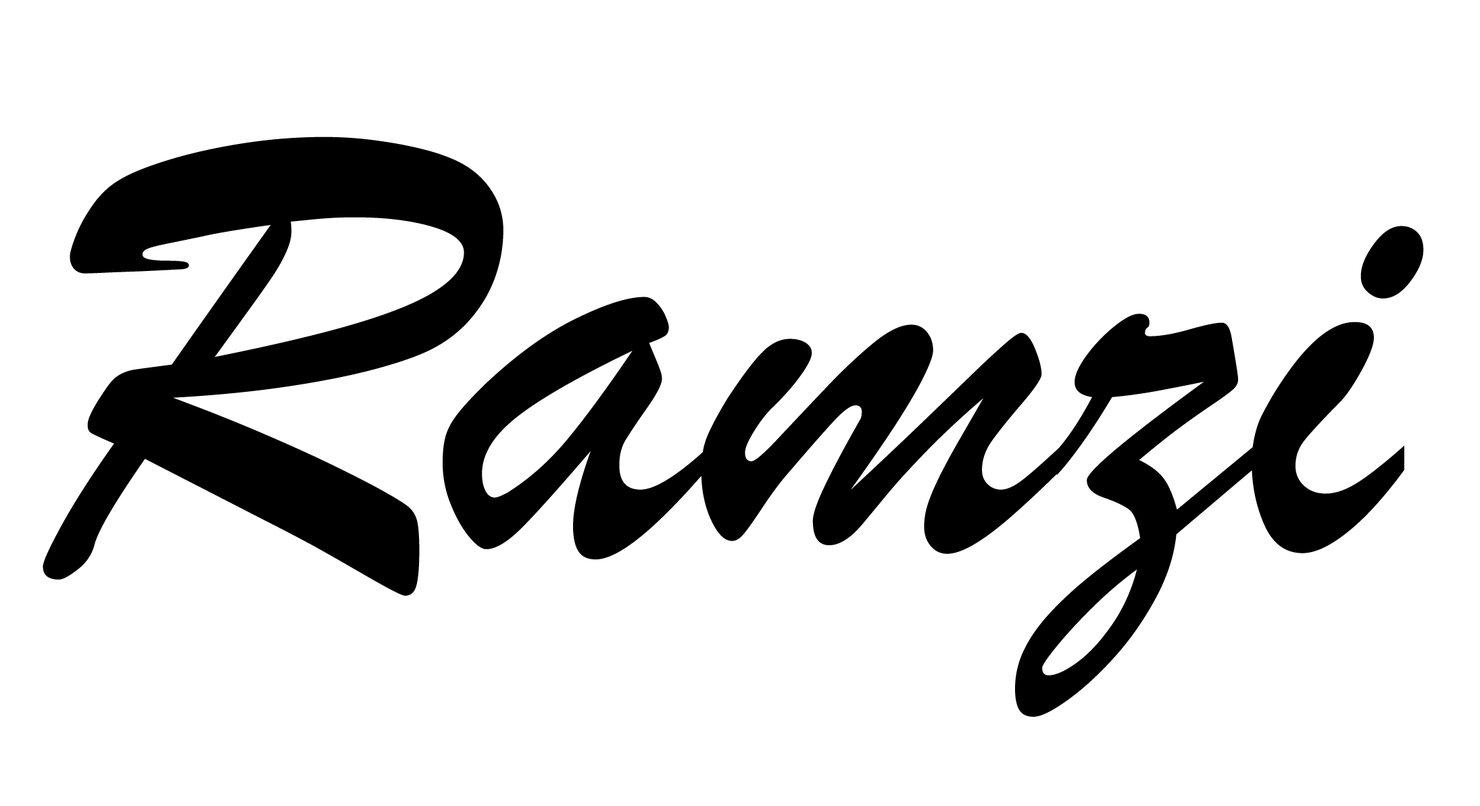
<style>
.page{position:relative;width:1480px;height:806px;background:#ffffff}
.page>*{position:absolute;margin:0}
.t1{font:675.6px "BrushScriptMT";color:#000000;scale:0.95 1}
</style>
<div class="page">
<p class="t1" style="left:43px;top:136px;width:1380px;height:581px">Ramzi</p>
</div>
